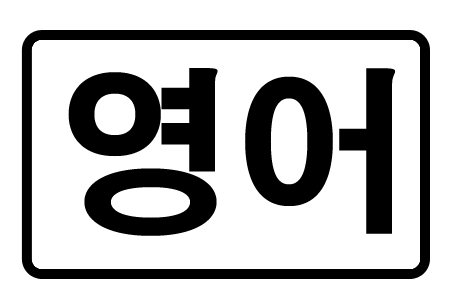
<style>
.page{position:relative;width:450px;height:300px;background:#ffffff}
.page>*{position:absolute;margin:0}
.t1{font:176.5px "AdobeGothicStd-Bold";color:#000000;text-transform:uppercase}
</style>
<div class="page">
<p class="t1" style="left:68px;top:68px;width:328px;height:168px">영어</p>
</div>
